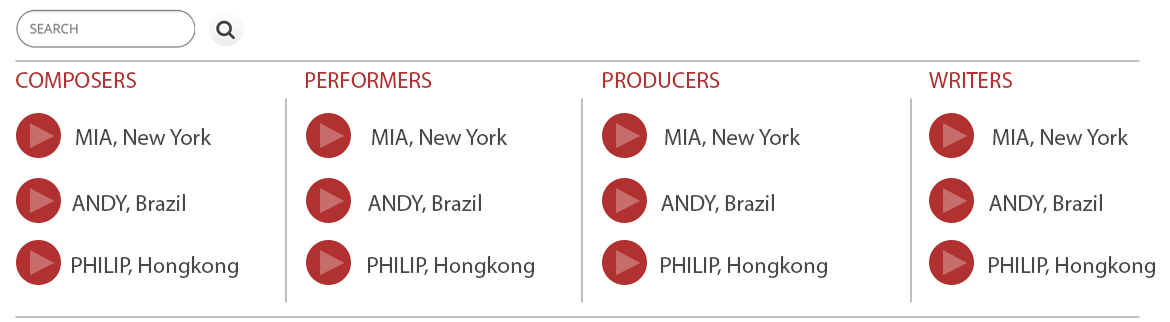
<style>
.page{position:relative;width:1170px;height:322px;background:#ffffff}
.page>*{position:absolute;margin:0}
.t1{font:22.9px "MyriadPro-Regular";color:#b13131;text-transform:uppercase}
.t2{font:22.9px "MyriadPro-Regular";color:#474747}
.t3{font:22.9px "MyriadPro-Regular";color:#474747;text-transform:uppercase}
</style>
<div class="page">
<p class="t1" style="left:16px;top:72px;width:120px;height:16px">Composers</p>
<p class="t1" style="left:305px;top:72px;width:127px;height:16px">Performers</p>
<p class="t1" style="left:603px;top:72px;width:117px;height:16px">producers</p>
<p class="t1" style="left:929px;top:72px;width:83px;height:16px">writers</p>
<p class="t2" style="left:76px;top:128px;width:135px;height:20px"><span class="t3">Mia, </span>New York</p>
<p class="t2" style="left:372px;top:128px;width:135px;height:20px"><span class="t3">Mia, </span>New York</p>
<p class="t2" style="left:665px;top:128px;width:135px;height:20px"><span class="t3">Mia, </span>New York</p>
<p class="t2" style="left:993px;top:128px;width:135px;height:20px"><span class="t3">Mia, </span>New York</p>
<p class="t2" style="left:72px;top:194px;width:113px;height:20px"><span class="t3">Andy, </span>Brazil</p>
<p class="t2" style="left:368px;top:194px;width:113px;height:20px"><span class="t3">Andy, </span>Brazil</p>
<p class="t2" style="left:661px;top:194px;width:113px;height:20px"><span class="t3">Andy, </span>Brazil</p>
<p class="t2" style="left:989px;top:194px;width:113px;height:20px"><span class="t3">Andy, </span>Brazil</p>
<p class="t2" style="left:72px;top:256px;width:166px;height:22px"><span class="t3">PHILIP, </span>Hongkong</p>
<p class="t2" style="left:368px;top:256px;width:166px;height:22px"><span class="t3">PHILIP, </span>Hongkong</p>
<p class="t2" style="left:661px;top:256px;width:166px;height:22px"><span class="t3">PHILIP, </span>Hongkong</p>
<p class="t2" style="left:989px;top:256px;width:166px;height:22px"><span class="t3">PHILIP, </span>Hongkong</p>
</div>
